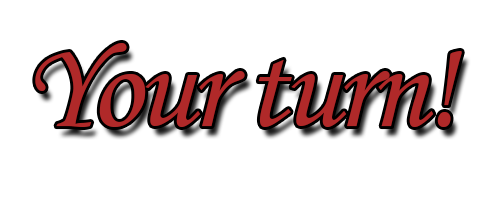
<style>
.page{position:relative;width:500px;height:200px;background:#ffffff}
.page>*{position:absolute;margin:0}
.t1{font:127px "MonotypeCorsiva";letter-spacing:-0.04em;color:#b02929}
</style>
<div class="page">
<p class="t1" style="left:35px;top:43px;width:427px;height:84px">Your turn!</p>
</div>
